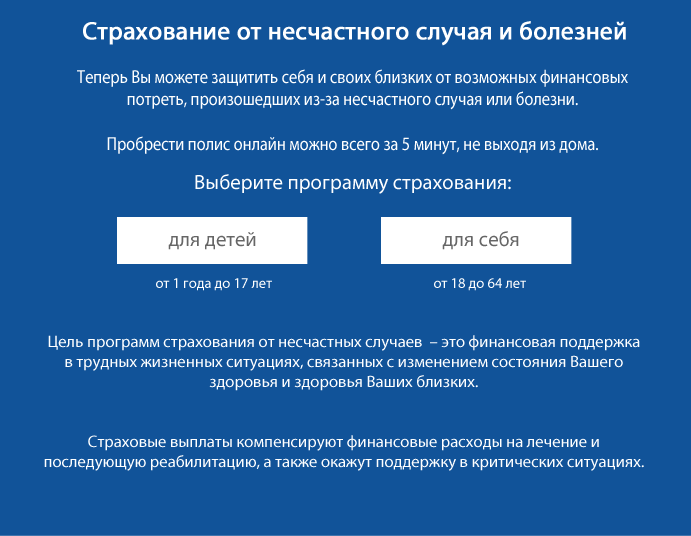
<style>
.page{position:relative;width:691px;height:536px;background:#115399}
.page>*{position:absolute;margin:0}
.t1{font:25px "MyriadPro-Regular";color:#ffffff;font-weight:bold}
.t2{font:18.7px "MyriadPro-Regular";color:#ffffff;scale:0.87 1}
.t3{font:20.8px "MyriadPro-Regular";color:#ffffff}
.t4{font:20.8px "MyriadPro-Regular";color:#666666}
.t5{font:14.6px "MyriadPro-Regular";color:#ffffff}
.t6{font:16.7px "MyriadPro-Regular";color:#ffffff}
</style>
<div class="page">
<p class="t1" style="left:83px;top:21px;width:543px;height:25px">Страхование от несчастного случая и болезней</p>
<p class="t2" style="left:77px;top:69px;width:551px;height:86px;text-align:center">Теперь Вы можете защитить себя и своих близких от возможных финансовых потреть, произошедших из-за несчастного случая или болезни. <br><br>Пробрести полис онлайн можно всего за 5 минут, не выходя из дома.</p>
<p class="t3" style="left:195px;top:174px;width:316px;height:20px">Выберите программу страхования:</p>
<p class="t4" style="left:168px;top:232px;width:88px;height:18px">для детей</p>
<p class="t4" style="left:442px;top:231px;width:77px;height:19px">для себя</p>
<p class="t5" style="left:156px;top:278px;width:116px;height:13px">от 1 года до 17 лет</p>
<p class="t5" style="left:434px;top:278px;width:92px;height:13px">от 18 до 64 лет</p>
<p class="t6" style="left:44px;top:335px;width:600px;height:136px;text-align:center">Цель программ страхования от несчастных случаев  – это финансовая поддержка в трудных жизненных ситуациях, связанных с изменением состояния Вашего здоровья и здоровья Ваших близких.<br> <br><br>Страховые выплаты компенсируют финансовые расходы на лечение и последующую реабилитацию, а также окажут поддержку в критических ситуациях.<br><br> <br><br>Программы страхования не могут предотвратить несчастный случай или болезнь, но могут стать дополнительным источником дохода при их наступлении.</p>
</div>
